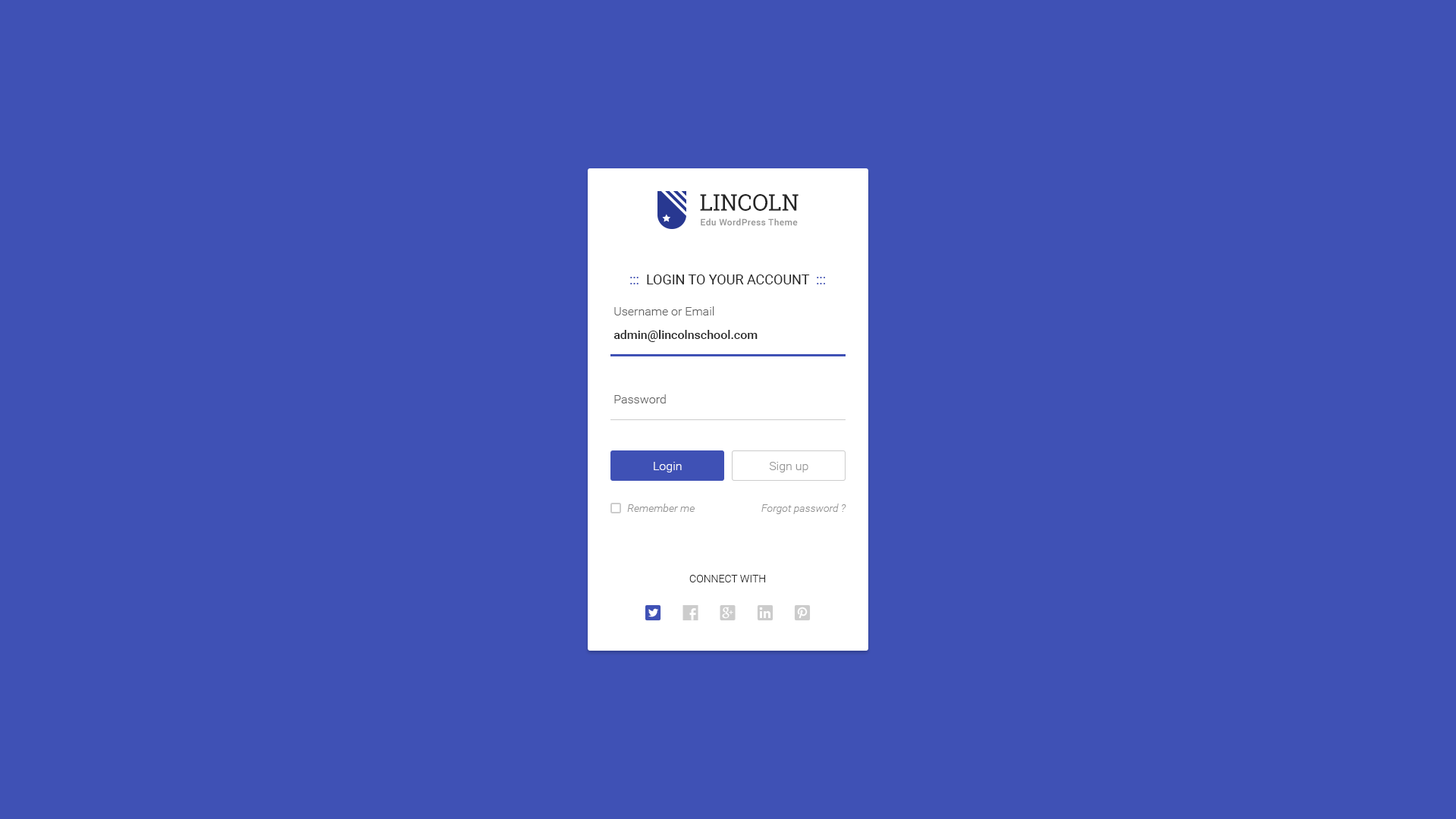
<style>
.page{position:relative;width:1456px;height:819px;background:#3f51b5}
.page>*{position:absolute;margin:0}
.t1{font:22.7px "RobotoSlab-Regular";color:#252525;text-transform:uppercase}
.t2{font:9.1px "Roboto-Medium";letter-spacing:0.03em;color:#959595}
.t3{font:13.6px "Roboto-Regular";color:#252525;text-transform:uppercase}
.t4{font:13.6px "Roboto-Regular";color:#3f51b5;text-transform:uppercase}
.t5{font:12.1px "Roboto-Light";color:#636363}
.t6{font:12.1px "Roboto-Medium";color:#252525}
.t7{font:12.1px "Roboto-Light";color:#ffffff}
.t8{font:12.1px "Roboto-Light";color:#959595}
.t9{font:10.6px "Roboto-LightItalic";color:#959595}
.t10{font:10.6px "Roboto-Light";color:#252525;text-transform:uppercase}
</style>
<div class="page">
<p class="t1" style="left:700px;top:194px;width:99px;height:17px">Lincoln</p>
<p class="t2" style="left:701px;top:218px;width:97px;height:8px">Edu WordPress Theme</p>
<p class="t3" style="left:630px;top:275px;width:195px;height:9px"><span class="t4">:::</span>  Login to your account  <span class="t4">:::</span></p>
<p class="t5" style="left:614px;top:306px;width:100px;height:9px">Username or Email</p>
<p class="t6" style="left:613px;top:330px;width:145px;height:12px">admin@lincolnschool.com</p>
<p class="t5" style="left:614px;top:394px;width:52px;height:9px">Password</p>
<p class="t7" style="left:654px;top:462px;width:28px;height:10px">Login</p>
<p class="t8" style="left:769px;top:462px;width:39px;height:10px">Sign up</p>
<p class="t9" style="left:627px;top:504px;width:68px;height:8px">Remember me</p>
<p class="t9" style="left:761px;top:504px;width:85px;height:10px">Forgot password ?</p>
<p class="t10" style="left:689px;top:575px;width:76px;height:7px">Connect with</p>
</div>
